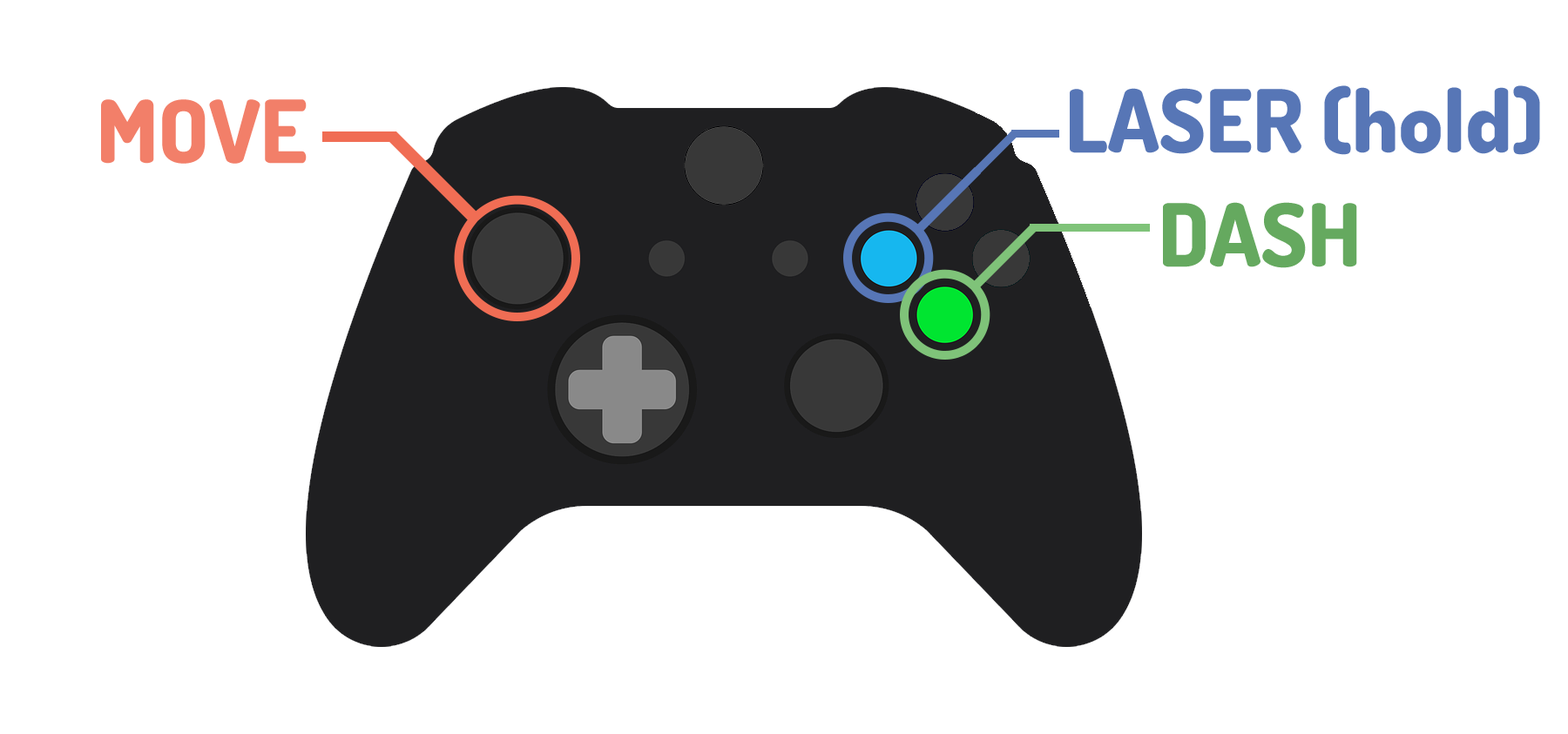
<style>
.page{position:relative;width:1568px;height:734px;background:#ffffff}
.page>*{position:absolute;margin:0}
.t1{font:87.1px "Dosis-ExtraBold";color:#5776b6}
.t2{font:87.1px "Dosis-ExtraBold";color:#f27f69}
.t3{font:87.1px "Dosis-ExtraBold";color:#65a95f}
</style>
<div class="page">
<p class="t1" style="left:1070px;top:85px;width:470px;height:70px">LASER (hold)</p>
<p class="t2" style="left:101px;top:99px;width:206px;height:65px">MOVE</p>
<p class="t3" style="left:1163px;top:202px;width:194px;height:66px">DASH</p>
</div>
